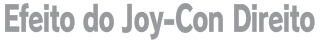
<style>
.page{position:relative;width:320px;height:40px;background:#ffffff}
.page>*{position:absolute;margin:0}
.t1{font:36px "RodinPro-EB";letter-spacing:-0.04em;color:#989a9d;scale:0.7 1}
</style>
<div class="page">
<p class="t1" style="left:5px;top:3px;width:310px;height:37px">Efeito do Joy-Con Direito</p>
</div>
